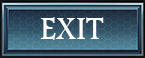
<style>
.page{position:relative;width:145px;height:58px}
.page>*{position:absolute;margin:0}
.t1{font:33.3px "Andalus";color:#ffffff}
</style>
<div class="page">
<p class="t1" style="left:41px;top:17px;width:63px;height:23px">EXIT</p>
</div>
